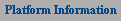
<style>
.page{position:relative;width:121px;height:21px;background:#b0adad}
.page>*{position:absolute;margin:0}
.t1{font:12px "TimesNewRomanPS-BoldMT";color:#064787}
</style>
<div class="page">
<p class="t1" style="left:5px;top:5px;width:112px;height:9px">Platform Information</p>
</div>
